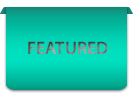
<style>
.page{position:relative;width:133px;height:95px}
.page>*{position:absolute;margin:0}
.t1{font:18px "MyriadPro-Semibold"}
</style>
<div class="page">
<p class="t1" style="left:28px;top:41px;width:80px;height:14px">FEATURED</p>
</div>
